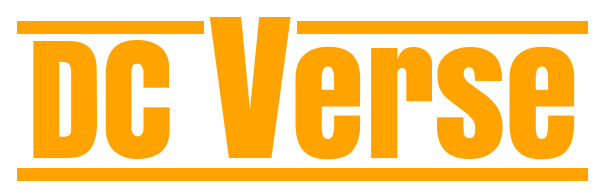
<style>
.page{position:relative;width:605px;height:196px;background:#ffffff}
.page>*{position:absolute;margin:0}
.t1{font:150px "Anton";color:#ffa301}
.t2{font:181px "Anton";color:#ffa301}
</style>
<div class="page">
<p class="t1" style="left:33px;top:17px;width:542px;height:143px">DC <span class="t2">V</span>erse</p>
</div>
